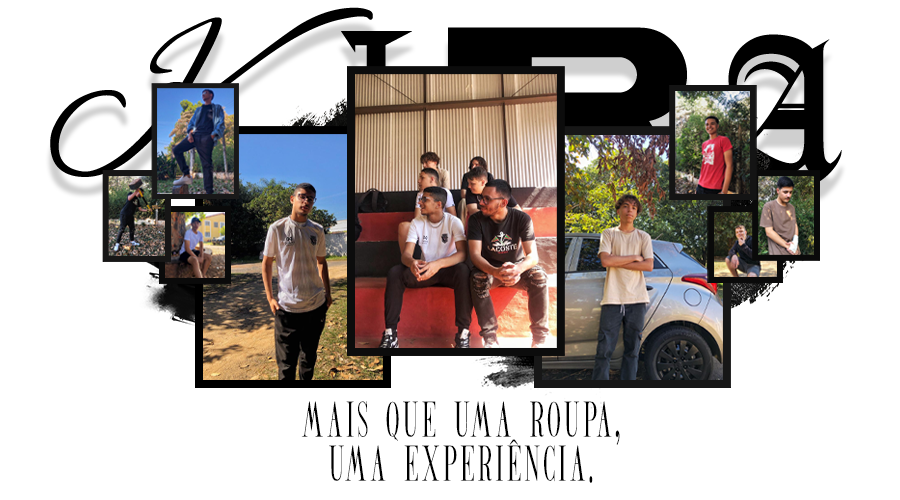
<style>
.page{position:relative;width:900px;height:500px;background:#ffffff}
.page>*{position:absolute;margin:0}
.t1{font:206.1px "AlexBrush-Regular";letter-spacing:0.1em;color:#000000}
.t2{font:206.1px "Bugermavle-Regular";letter-spacing:0.1em}
.t3{font:257.7px "AvestravaRegularPersonalUseOnly";letter-spacing:0.1em;color:#000000}
.t4{font:37px/44px "BATICKRODISTSERIF";letter-spacing:0.1em;color:#000000}
</style>
<div class="page">
<p class="t1" style="left:50px;top:7px;width:323px;height:181px">K</p>
<p class="t2" style="left:448px;top:27px;width:239px;height:156px">R</p>
<p class="t3" style="left:702px;top:34px;width:140px;height:151px">A</p>
<p class="t4" style="left:301px;top:401px;width:319px;height:82px;text-align:center">Mais que uma roupa,<br>uma experiência.</p>
</div>
